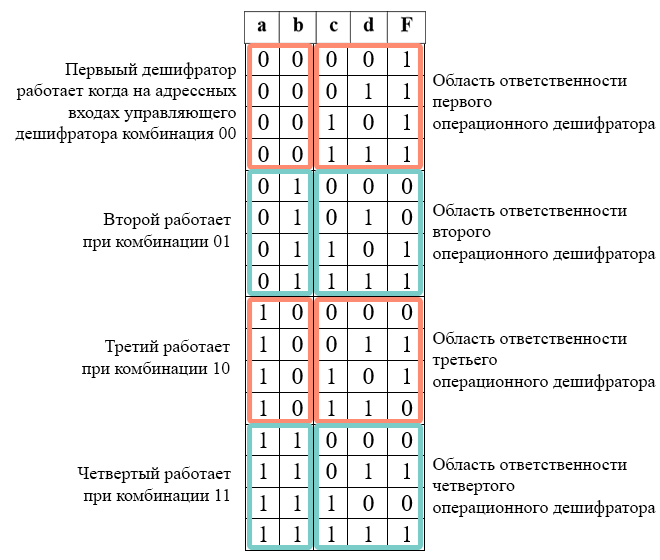
<style>
.page{position:relative;width:660px;height:560px;background:#ffffff}
.page>*{position:absolute;margin:0}
.t1{font:18px "TimesNewRomanPSMT";color:#000000}
</style>
<div class="page">
<p class="t1" style="left:15px;top:62px;width:222px;height:81px;text-align:right">Первыый дешифратор<br>работает когда на адрессных<br>входах управляющего<br>дешифратора комбинация 00</p>
<p class="t1" style="left:432px;top:73px;width:224px;height:60px">Область ответственности<br>первого <br>операционного дешифратора</p>
<p class="t1" style="left:432px;top:203px;width:224px;height:60px">Область ответственности<br>второго <br>операционного дешифратора</p>
<p class="t1" style="left:83px;top:212px;width:148px;height:39px;text-align:right">Второй работает<br>при комбинации 01</p>
<p class="t1" style="left:82px;top:339px;width:148px;height:39px;text-align:right">Третий работает<br>при комбинации 10</p>
<p class="t1" style="left:432px;top:331px;width:224px;height:60px">Область ответственности<br>третьего<br>операционного дешифратора</p>
<p class="t1" style="left:432px;top:457px;width:224px;height:60px">Область ответственности<br>четвертого<br>операционного дешифратора</p>
<p class="t1" style="left:77px;top:466px;width:154px;height:39px;text-align:right">Четвертый работает<br>при комбинации 11</p>
</div>
